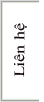
<style>
.page{position:relative;width:44px;height:102px;background:#ffffff}
.page>*{position:absolute;margin:0}
.t1{font:14.5px "TimesNewRomanPSMT";color:#12080e;scale:1.24 1}
</style>
<div class="page">
<p class="t1" style="left:14px;top:23px;width:13px;height:54px;rotate:-90deg">Liên hệ</p>
</div>
